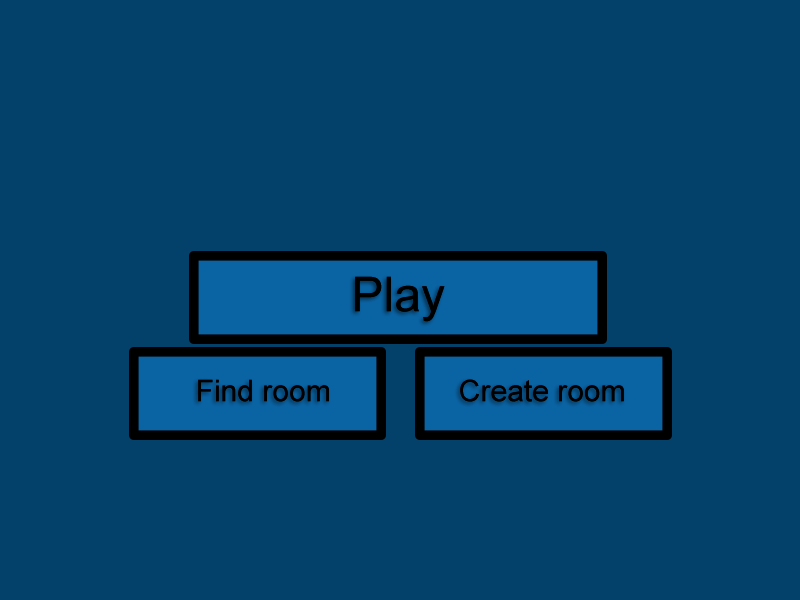
<style>
.page{position:relative;width:800px;height:600px;background:#03406a}
.page>*{position:absolute;margin:0}
.t1{font:48px "ArialMT";color:#000000}
.t2{font:30px "ArialMT";color:#000000}
</style>
<div class="page">
<p class="t1" style="left:355px;top:276px;width:90px;height:46px">Play</p>
<p class="t1" style="left:355px;top:276px;width:90px;height:46px">Play</p>
<p class="t2" style="left:198px;top:379px;width:131px;height:23px">Find room</p>
<p class="t2" style="left:198px;top:379px;width:131px;height:23px">Find room</p>
<p class="t2" style="left:460px;top:379px;width:164px;height:23px">Create room</p>
<p class="t2" style="left:460px;top:379px;width:164px;height:23px">Create room</p>
</div>
